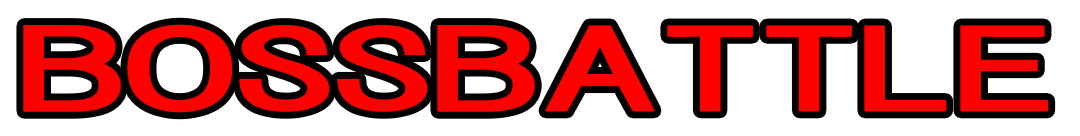
<style>
.page{position:relative;width:1080px;height:136px;background:#ffffff}
.page>*{position:absolute;margin:0}
.t1{font:106.1px "HGPGothicE";letter-spacing:-0.07em;color:#ff0000;font-weight:bold;scale:1.78 1}
</style>
<div class="page">
<p class="t1" style="left:23px;top:24px;width:1026px;height:89px">BOSSBATTLE</p>
</div>
